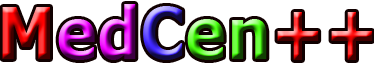
<style>
.page{position:relative;width:374px;height:65px;background:#ffffff}
.page>*{position:absolute;margin:0}
.t1{font:72px "Verdana-Bold";scale:0.86 1}
</style>
<div class="page">
<p class="t1" style="left:2px;top:4px;width:371px;height:56px">MedCen++</p>
</div>
